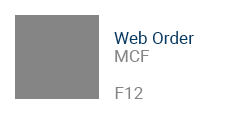
<style>
.page{position:relative;width:228px;height:114px;background:#ffffff}
.page>*{position:absolute;margin:0}
.t1{font:14.7px "MyriadPro-Regular"}
.t2{font:14.7px "MyriadPro-Regular";color:#858585}
</style>
<div class="page">
<p class="t1" style="left:114px;top:31px;width:80px;height:31px">Web Order <br>MCF</p>
<p class="t2" style="left:115px;top:87px;width:28px;height:12px">F12</p>
</div>
